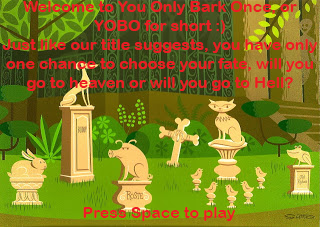
<style>
.page{position:relative;width:320px;height:227px}
.page>*{position:absolute;margin:0}
.t1{font:16px "ArialRoundedMTBold";color:#ed1c24}
</style>
<div class="page">
<p class="t1" style="left:2px;top:1px;width:315px;height:90px;text-align:center">Welcome to You Only Bark Once, or YOBO for short :)<br>Just like our title suggests, you have only one chance to choose your fate, will you go to heaven or will you go to Hell?</p>
<p class="t1" style="left:83px;top:207px;width:152px;height:14px">Press Space to play</p>
</div>
